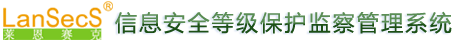
<style>
.page{position:relative;width:461px;height:42px;background:#ffffff}
.page>*{position:absolute;margin:0}
.t1{font:22px "MicrosoftYaHei";letter-spacing:0.1em}
</style>
<div class="page">
<p class="t1" style="left:115px;top:11px;width:337px;height:23px">信息安全等级保护监察管理系统</p>
</div>
